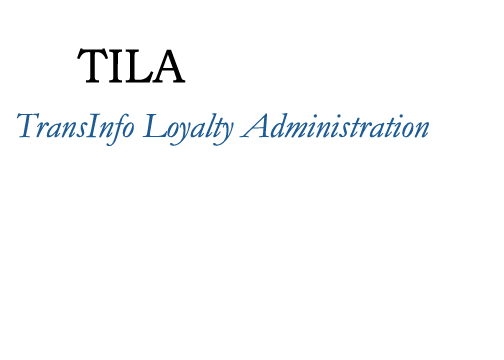
<style>
.page{position:relative;width:504px;height:360px;background:#ffffff}
.page>*{position:absolute;margin:0}
.t1{font:48px "BookmanOldStyle";color:#000000}
.t2{font:36px "Garamond-Italic";color:#1c5b94}
</style>
<div class="page">
<p class="t1" style="left:77px;top:48px;width:109px;height:35px">TILA</p>
<p class="t2" style="left:16px;top:113px;width:413px;height:34px">TransInfo Loyalty Administration</p>
</div>
